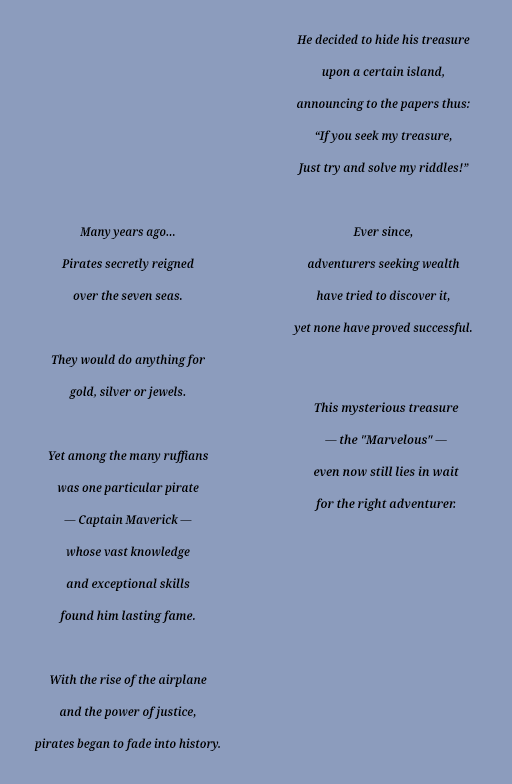
<style>
.page{position:relative;width:512px;height:784px;background:#8c9cbd}
.page>*{position:absolute;margin:0}
.t1{font:12.1px/32px "NotoSerif-BoldItalic";color:#000000;scale:0.9 1}
.t2{font:12.1px/32px "NotoSerif-BoldItalic";color:#000000;scale:0.89 1}
.t3{font:12.1px/32px "NotoSerif-BoldItalic";color:#000000;scale:0.87 1}
.t4{font:12.1px/32px "NotoSerif-BoldItalic";color:#000000;scale:0.91 1}
.t5{font:12.1px/32px "NotoSerif-BoldItalic";color:#000000;scale:0.93 1}
</style>
<div class="page">
<p class="t1" style="left:292px;top:34px;width:180px;height:301px;text-align:center">He decided to hide his treasure<br>upon a certain island,<br>announcing to the papers thus:<br>“If you seek my treasure,<br>Just try and solve my riddles!”<br><br>Ever since,<br><span class="t2">adventurers seeking wealth<br>have tried to discover it,<br>yet none have proved successful.</span></p>
<p class="t1" style="left:34px;top:227px;width:186px;height:524px;text-align:center"><span class="t3">Many years ago...<br></span>Pirates secretly reigned<br>over the seven seas.<br><br>They would do anything for<br><span class="t2">gold, silver or jewels.<br></span><br>Yet among the many ruffians<br><span class="t2">was one particular pirate<br></span>— Captain Maverick —<br>whose vast knowledge<br><span class="t4">and exceptional skills<br>found him lasting fame.<br></span><br>With the rise of the airplane<br>and the power of justice,<br><span class="t2">pirates began to fade into history.</span></p>
<p class="t5" style="left:314px;top:402px;width:145px;height:109px;text-align:center">This mysterious treasure<br>— the "Marvelous" —<br>even now still lies in wait<br>for the right adventurer.</p>
</div>
